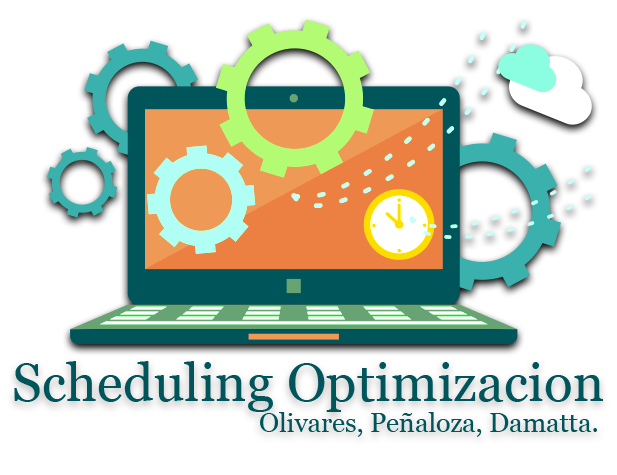
<style>
.page{position:relative;width:617px;height:475px;background:#ffffff}
.page>*{position:absolute;margin:0}
.t1{font:53.3px "Georgia";color:#00555b}
.t2{font:26.7px "Georgia";color:#00555b}
</style>
<div class="page">
<p class="t1" style="left:14px;top:361px;width:589px;height:51px">Scheduling Optimizacion</p>
<p class="t2" style="left:260px;top:412px;width:337px;height:25px">Olivares, Peñaloza, Damatta.</p>
</div>
